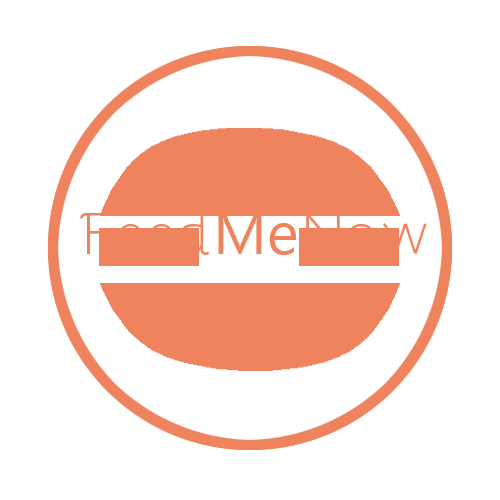
<style>
.page{position:relative;width:500px;height:500px;background:#ffffff}
.page>*{position:absolute;margin:0}
.t1{font:60px "Bellota-Light";color:#ee835e}
.t2{font:60px "NirmalaUI";color:#ee835e}
</style>
<div class="page">
<p class="t1" style="left:80px;top:210px;width:347px;height:45px">Feed<span class="t2">Me</span>Now</p>
</div>
